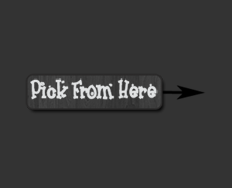
<style>
.page{position:relative;width:232px;height:188px;background:#333333}
.page>*{position:absolute;margin:0}
.t1{font:21.7px "Frosty";color:#e1e3e4}
</style>
<div class="page">
<p class="t1" style="left:30px;top:78px;width:128px;height:22px">Pick From Here</p>
</div>
